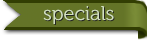
<style>
.page{position:relative;width:147px;height:40px}
.page>*{position:absolute;margin:0}
.t1{font:20px "Museo-300";color:#d3e1c2}
</style>
<div class="page">
<p class="t1" style="left:43px;top:6px;width:71px;height:18px">specials</p>
</div>
